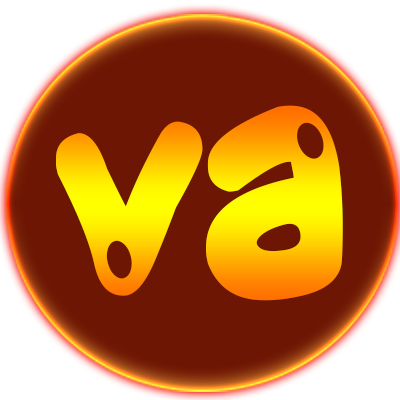
<style>
.page{position:relative;width:400px;height:400px;background:#6d1603}
.page>*{position:absolute;margin:0}
.t1{font:200.7px "JuicyFruity";scale:0.83 1}
</style>
<div class="page">
<p class="t1" style="left:56px;top:105px;width:287px;height:196px">Va</p>
</div>
